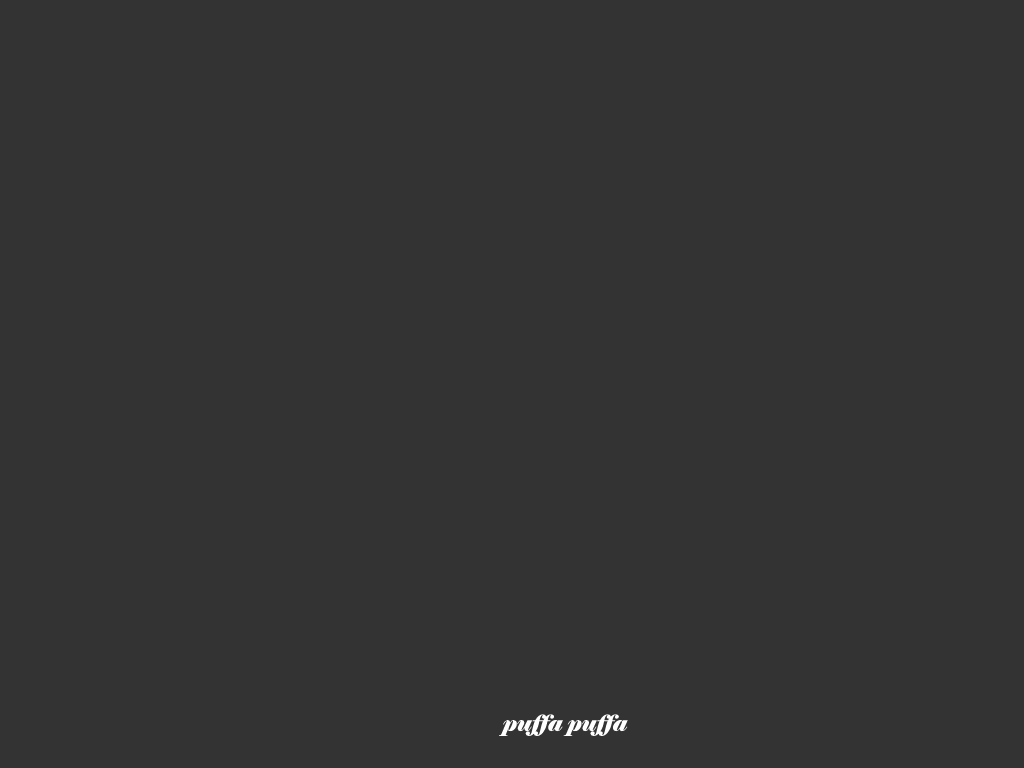
<style>
.page{position:relative;width:1024px;height:768px;background:#333333}
.page>*{position:absolute;margin:0}
.t1{font:22px "Elephant-Italic";color:#ffffff}
</style>
<div class="page">
<p class="t1" style="left:499px;top:714px;width:129px;height:22px">puffa puffa</p>
</div>
